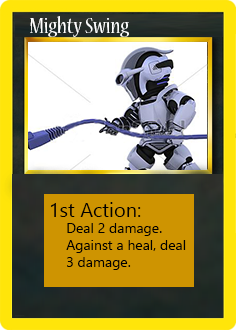
<style>
.page{position:relative;width:236px;height:330px}
.page>*{position:absolute;margin:0}
.t1{font:24px "NuevaStd-Cond";color:#ffffff}
.t2{font:20px "LeelawadeeUI";color:#000000}
.t3{font:14px "LeelawadeeUI";color:#000000}
</style>
<div class="page">
<p class="t1" style="left:30px;top:16px;width:99px;height:21px">Mighty Swing</p>
<p class="t2" style="left:50px;top:202px;width:91px;height:15px">1st Action:</p>
<p class="t3" style="left:66px;top:223px;width:120px;height:47px">Deal 2 damage. <br>Against a heal, deal <br>3 damage.</p>
</div>
